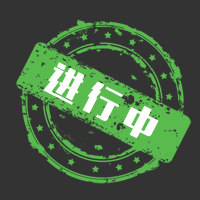
<style>
.page{position:relative;width:200px;height:200px;background:#333333}
.page>*{position:absolute;margin:0}
.t1{font:34.2px "MFLiHei_Noncommercial-Regular";letter-spacing:0.26em;color:#ffffff}
</style>
<div class="page">
<p class="t1" style="left:43px;top:62px;width:116px;height:77px;rotate:27deg">进行中</p>
</div>
